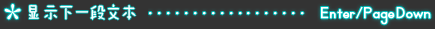
<style>
.page{position:relative;width:435px;height:29px;background:#333333}
.page>*{position:absolute;margin:0}
.t1{font:18px "¢è?";color:#ffffff}
</style>
<div class="page">
<p class="t1" style="left:29px;top:4px;width:107px;height:16px">显示下一段文本</p>
</div>
